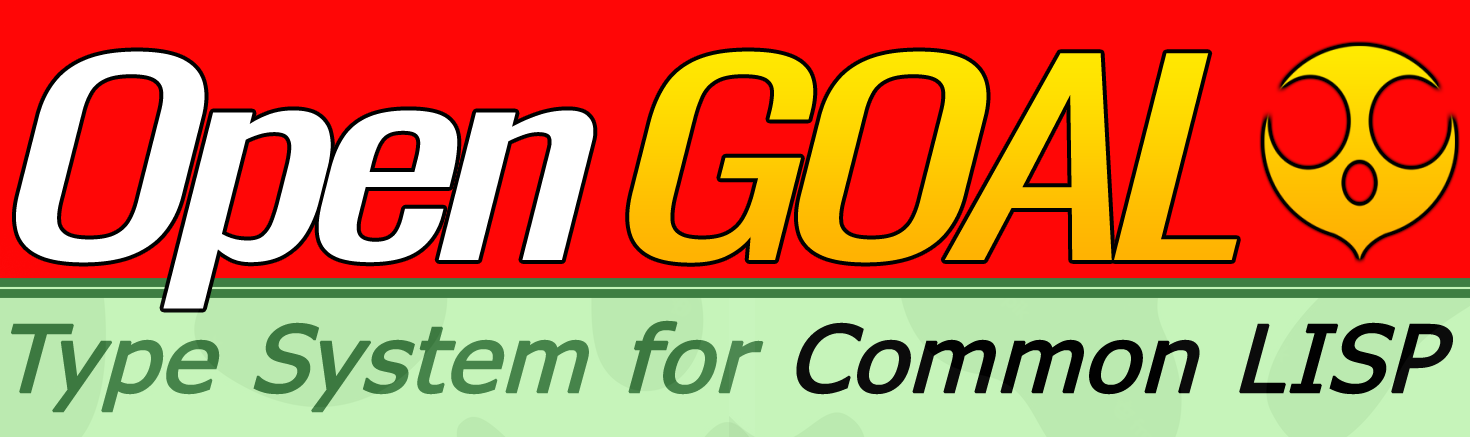
<style>
.page{position:relative;width:1470px;height:437px;background:#ff0606}
.page>*{position:absolute;margin:0}
.t1{font:255.2px "Oswald-Regular";letter-spacing:-0.075em;color:#ffffff;font-style:italic;scale:1.44 1}
.t2{font:255.2px "Oswald-Regular";letter-spacing:-0.075em;font-style:italic;scale:1.44 1}
.t3{font:92.5px "Tahoma";color:#3e7e42;font-weight:bold;font-style:italic;scale:1.09 1}
.t4{font:92.5px "Tahoma";color:#000000;font-weight:bold;font-style:italic;scale:1.09 1}
</style>
<div class="page">
<p class="t1" style="left:16px;top:51px;width:578px;height:258px">Open</p>
<p class="t2" style="left:629px;top:51px;width:608px;height:212px">GOAL</p>
<p class="t3" style="left:11px;top:320px;width:1442px;height:93px">Type System for <span class="t4">Common LISP</span></p>
</div>
